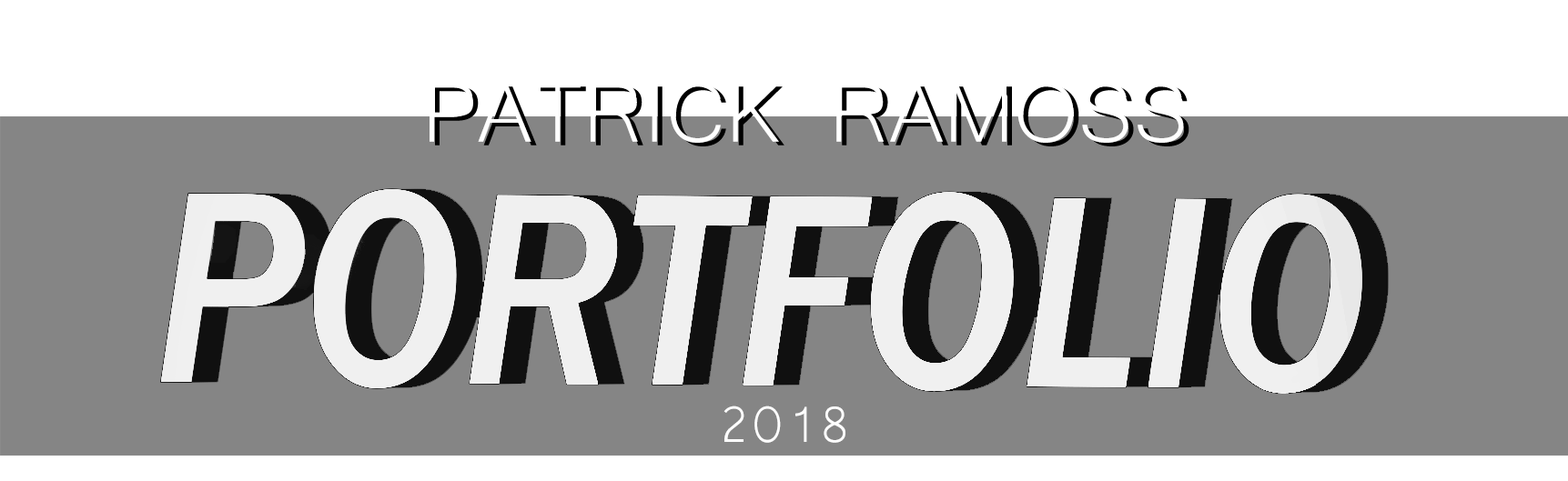
<style>
.page{position:relative;width:1568px;height:481px;background:#858585}
.page>*{position:absolute;margin:0}
.t1{font:109.2px "Microsoft-Yi-Baiti";color:#ffffff}
.t2{font:109.2px "Microsoft-Yi-Baiti";color:#000000}
.t3{font:65.5px "Microsoft-Yi-Baiti";color:#ffffff}
</style>
<div class="page">
<p class="t1" style="left:430px;top:82px;width:754px;height:61px">PATRICK RAMOSS</p>
<p class="t2" style="left:435px;top:86px;width:754px;height:61px">PATRICK RAMOSS</p>
<p class="t3" style="left:723px;top:406px;width:122px;height:37px">2018</p>
</div>
